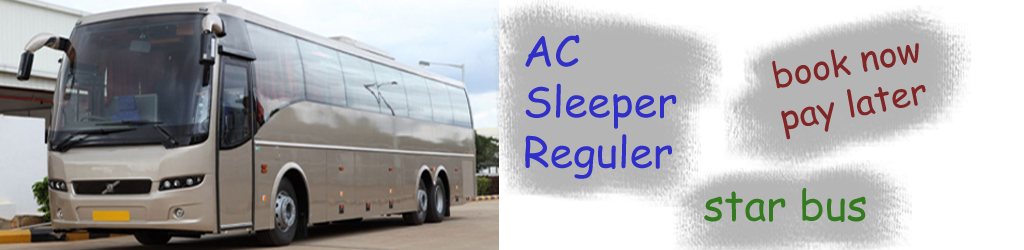
<style>
.page{position:relative;width:1024px;height:250px}
.page>*{position:absolute;margin:0}
.t1{font:42px "ComicSansMS";color:#3030c9}
.t2{font:35.3px "ComicSansMS";color:#802626}
.t3{font:42px "ComicSansMS";color:#347a1f}
</style>
<div class="page">
<p class="t1" style="left:525px;top:35px;width:152px;height:144px">AC <br>Sleeper<br>Reguler</p>
<p class="t2" style="left:772px;top:43px;width:154px;height:97px;rotate:-11deg">book now <br>pay later</p>
<p class="t3" style="left:704px;top:188px;width:162px;height:34px">star bus</p>
</div>
